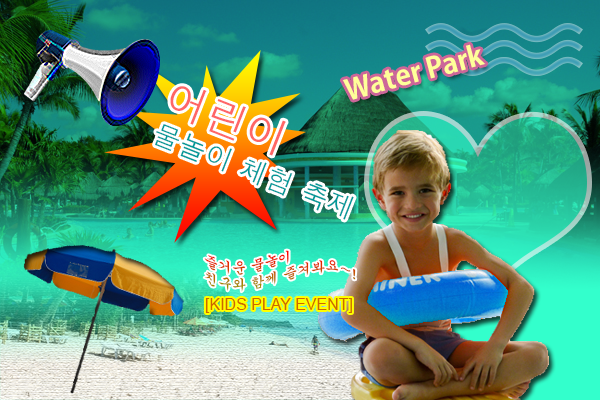
<style>
.page{position:relative;width:600px;height:400px}
.page>*{position:absolute;margin:0}
.t1{font:28px "AdobeGothicStd-Bold";color:#ffff99}
.t2{font:14px "Gungsuh"}
.t3{font:16.1px "ArialMT";color:#cc6600}
</style>
<div class="page">
<p class="t1" style="left:342px;top:44px;width:144px;height:56px;rotate:-15deg">Water Park</p>
<p class="t2" style="left:204px;top:250px;width:152px;height:42px">즐거운 물놀이<br>친구와 함께 즐겨봐요~!</p>
<p class="t3" style="left:205px;top:298px;width:147px;height:15px">[KIDS PLAY EVENT]</p>
</div>
